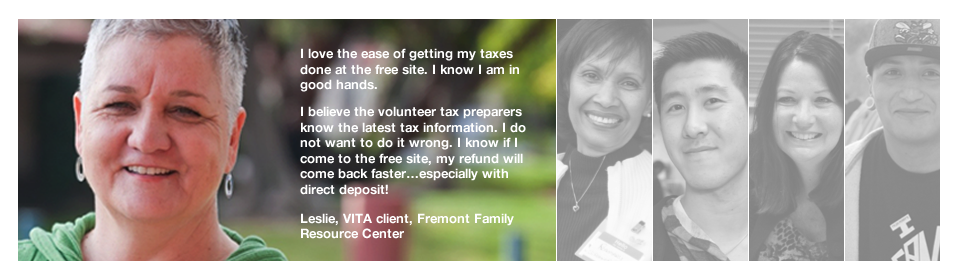
<style>
.page{position:relative;width:960px;height:279px}
.page>*{position:absolute;margin:0}
.t1{font:13px/15.6px "HelveticaNeue-Bold";color:#ffffff}
</style>
<div class="page">
<p class="t1" style="left:300px;top:48px;width:226px;height:191px">I love the ease of getting my taxes done at the free site. I know I am in good hands. <br>I believe the volunteer tax preparers know the latest tax information. I do not want to do it wrong. I know if I come to the free site, my refund will come back faster…especially with direct deposit!<br>Leslie, VITA client, Fremont Family Resource Center</p>
</div>
